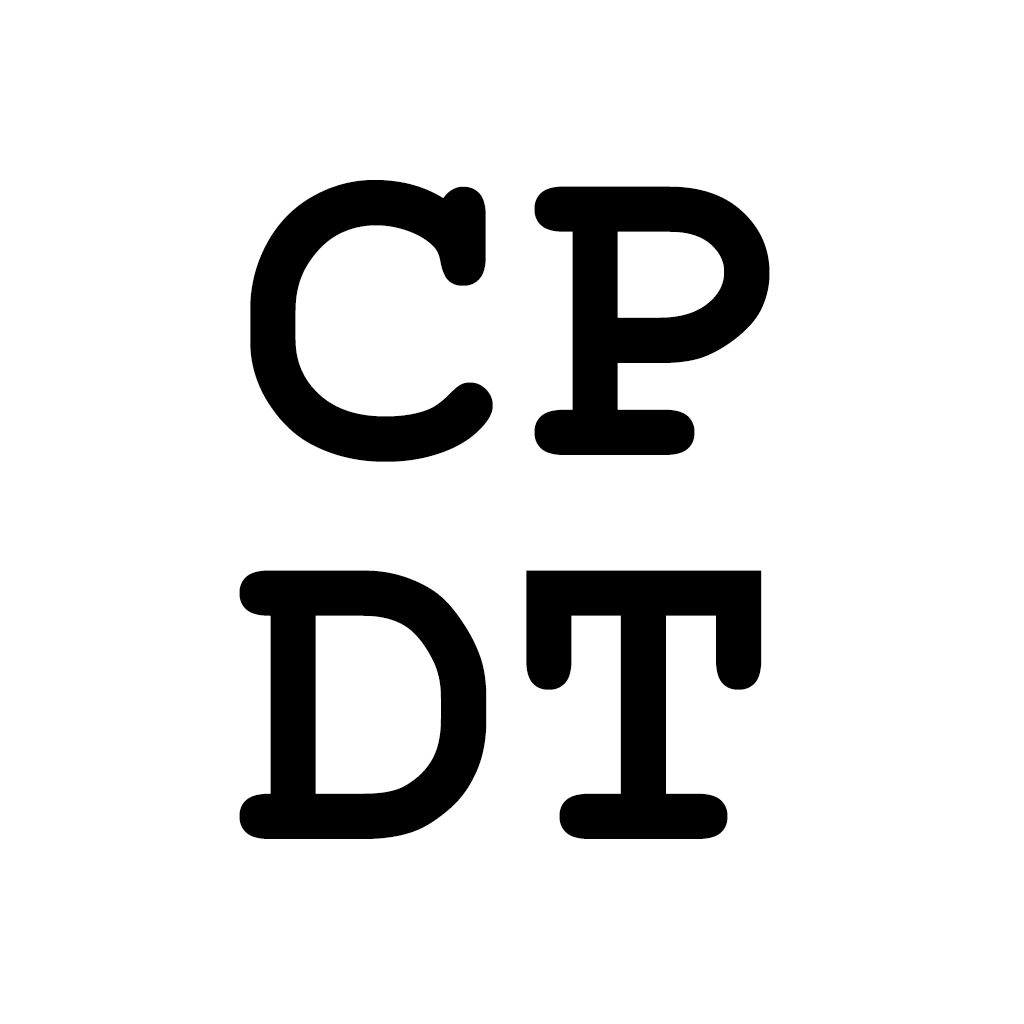
<style>
.page{position:relative;width:1024px;height:1024px;background:#ffffff}
.page>*{position:absolute;margin:0}
.t1{font:453.3px/384px "CourierNewPS-BoldMT";color:#000000}
</style>
<div class="page">
<p class="t1" style="left:239px;top:180px;width:531px;height:659px">CP<br>DT</p>
</div>
